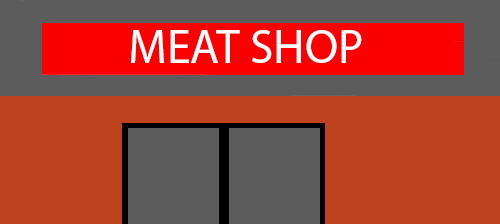
<style>
.page{position:relative;width:500px;height:224px;background:#5d5c5c}
.page>*{position:absolute;margin:0}
.t1{font:47.8px "MyriadPro-Regular";color:#ffffff}
</style>
<div class="page">
<p class="t1" style="left:131px;top:30px;width:231px;height:33px">MEAT SHOP</p>
</div>
